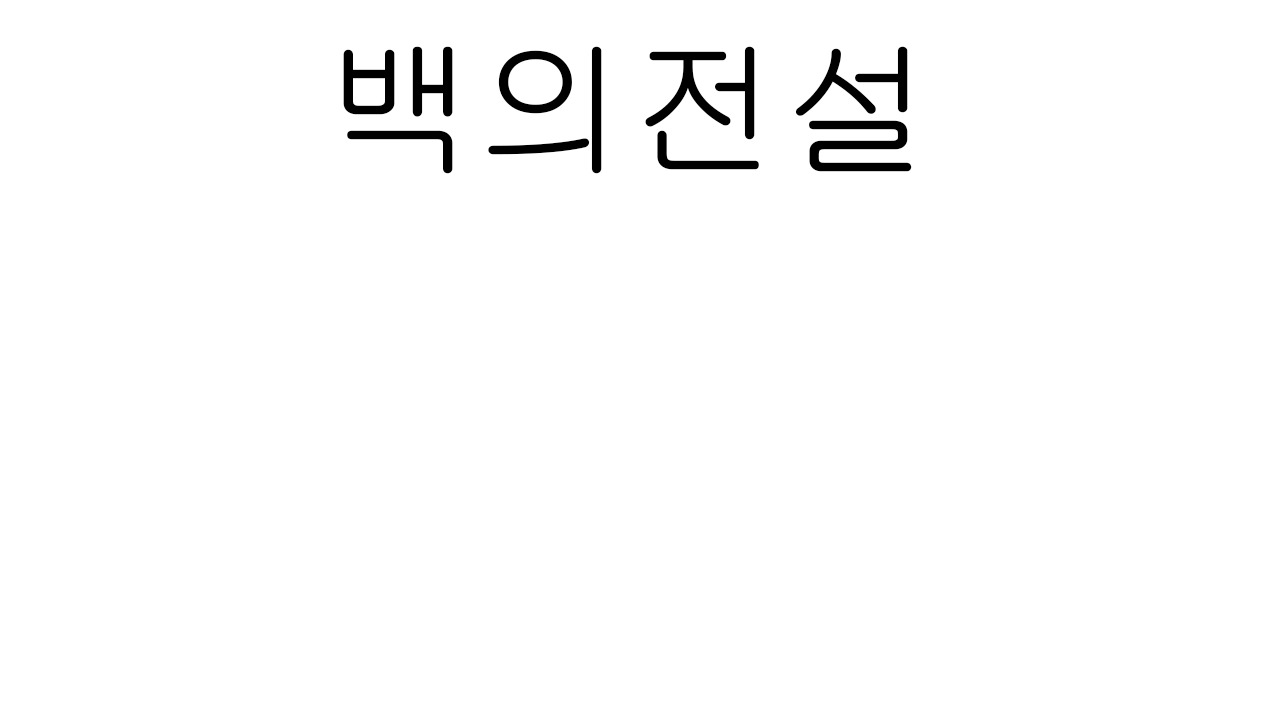
<style>
.page{position:relative;width:1280px;height:720px;background:#ffffff}
.page>*{position:absolute;margin:0}
.t1{font:153.6px "Gulim";letter-spacing:-0.03em;color:#000000;font-weight:bold}
</style>
<div class="page">
<p class="t1" style="left:343px;top:46px;width:569px;height:128px">백의전설</p>
</div>
